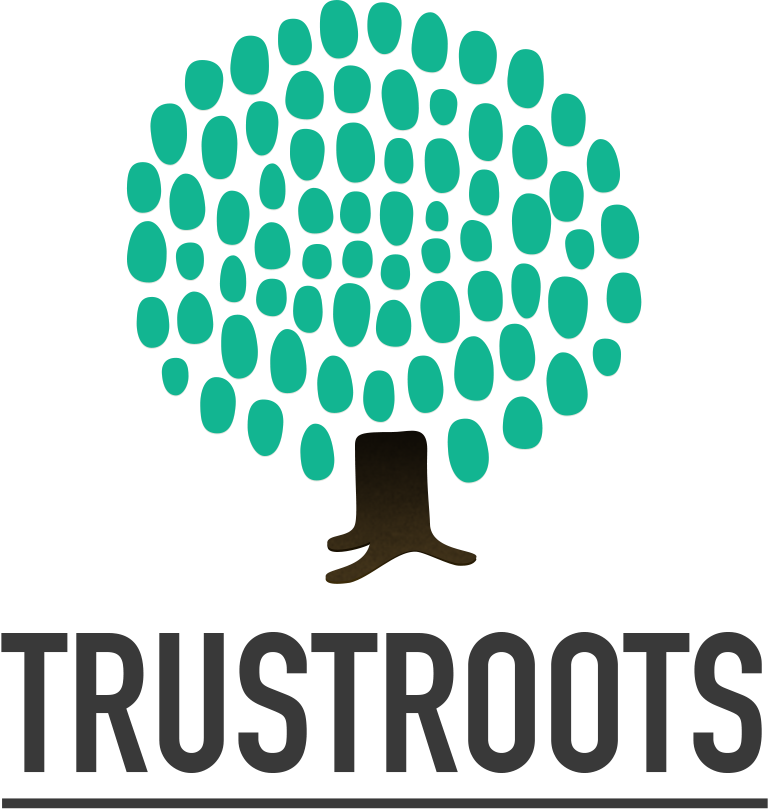
<style>
.page{position:relative;width:769px;height:809px;background:#ffffff}
.page>*{position:absolute;margin:0}
.t1{font:195px "DINCondensed-Bold";color:#393939;text-transform:uppercase;text-decoration:underline}
</style>
<div class="page">
<p class="t1" style="left:1px;top:632px;width:767px;height:177px">TrustRoots</p>
</div>
